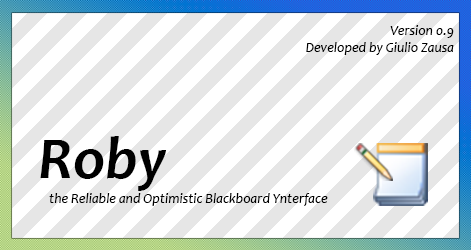
<style>
.page{position:relative;width:471px;height:250px;background:#ffffff}
.page>*{position:absolute;margin:0}
.t1{font:14px "Candara-Italic";color:#000000}
.t2{font:60px "Candara-BoldItalic";color:#000000}
</style>
<div class="page">
<p class="t1" style="left:306px;top:25px;width:148px;height:30px;text-align:right">Version 0.9<br> Developed by Giulio Zausa</p>
<p class="t2" style="left:40px;top:136px;width:126px;height:55px">Roby</p>
<p class="t1" style="left:49px;top:193px;width:279px;height:13px">the Reliable and Optimistic Blackboard Ynterface</p>
</div>
